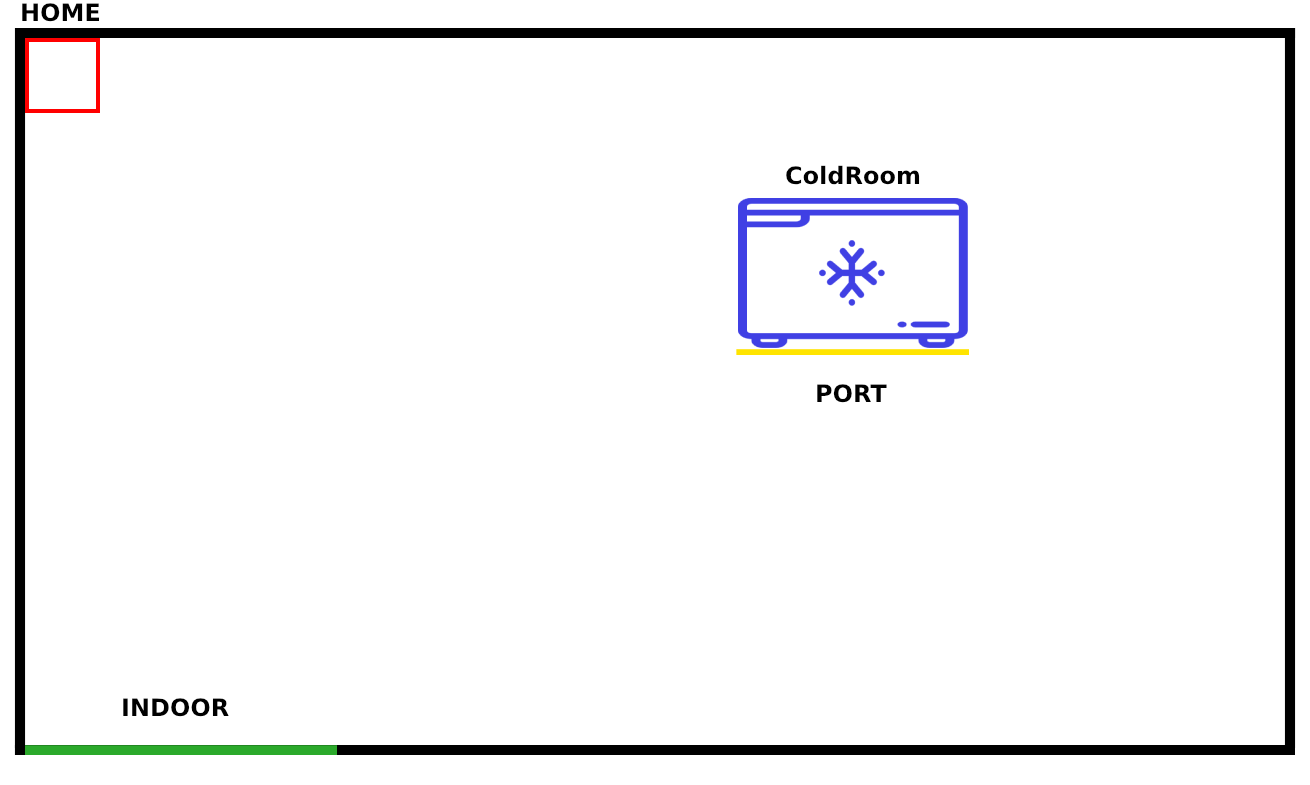
<style>
.page{position:relative;width:1310px;height:785px;background:#ffffff}
.page>*{position:absolute;margin:0}
.t1{font:24px "DejaVuSans-Bold";color:#000000}
</style>
<div class="page">
<p class="t1" style="left:22px;top:3px;width:78px;height:19px">HOME</p>
<p class="t1" style="left:786px;top:165px;width:134px;height:20px">ColdRoom</p>
<p class="t1" style="left:817px;top:384px;width:70px;height:19px">PORT</p>
<p class="t1" style="left:123px;top:698px;width:106px;height:19px">INDOOR</p>
</div>
